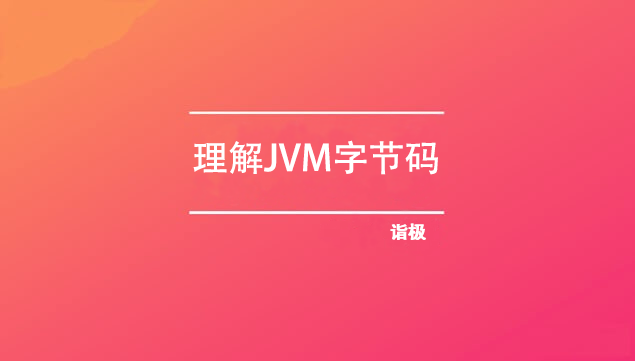
<style>
.page{position:relative;width:635px;height:361px}
.page>*{position:absolute;margin:0}
.t1{font:36px "AdobeHeitiStd-Regular";color:#ffffff}
.t2{font:18px "AdobeHeitiStd-Regular";color:#ffffff}
</style>
<div class="page">
<p class="t1" style="left:193px;top:140px;width:245px;height:35px">理解JVM字节码</p>
<p class="t2" style="left:390px;top:223px;width:35px;height:17px">诣极</p>
<p class="t2" style="left:391px;top:223px;width:35px;height:17px">诣极</p>
</div>
